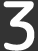
<style>
.page{position:relative;width:38px;height:51px;background:#333333}
.page>*{position:absolute;margin:0}
.t1{font:66.7px "RoundedMplus1c-Medium";color:#ffffff}
</style>
<div class="page">
<p class="t1" style="left:3px;top:1px;width:32px;height:50px">3</p>
</div>
